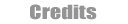
<style>
.page{position:relative;width:128px;height:24px;background:#ffffff}
.page>*{position:absolute;margin:0}
.t1{font:18px "Impact";color:#959494;scale:1.25 1}
</style>
<div class="page">
<p class="t1" style="left:30px;top:4px;width:67px;height:16px">Credits</p>
</div>
